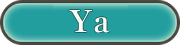
<style>
.page{position:relative;width:180px;height:45px;background:#239e9f}
.page>*{position:absolute;margin:0}
.t1{font:30px "RyuminPro-ExBold";color:#fff7f3}
</style>
<div class="page">
<p class="t1" style="left:69px;top:10px;width:41px;height:23px">Ya</p>
</div>
